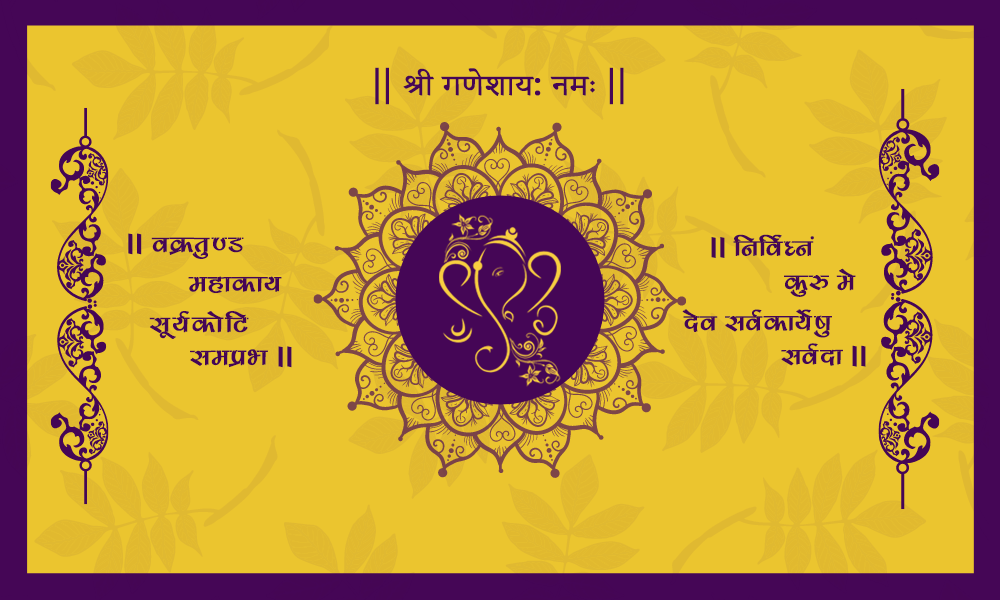
<style>
.page{position:relative;width:1000px;height:600px;background:#ebc52f}
.page>*{position:absolute;margin:0}
.t1{font:36.1px "AdobeDevanagari-Regular";color:#450656;font-weight:bold;scale:1.09 1}
.t2{font:36.1px "MyriadPro-Regular";color:#450656;font-weight:bold;scale:1.09 1}
.t3{font:27.5px "KrutiDev180";letter-spacing:0.02em;color:#450555;font-weight:bold;scale:1.09 1}
.t4{font:27.5px "YatraOne-Regular";letter-spacing:0.02em;color:#450555;font-weight:bold;scale:1.09 1}
.t5{font:27.7px "KrutiDev180";color:#450654;font-weight:bold;scale:1.09 1}
.t6{font:27.7px "YatraOne-Regular";letter-spacing:0.02em;color:#450654;font-weight:bold;scale:1.09 1}
</style>
<div class="page">
<p class="t1" style="left:375px;top:67px;width:249px;height:38px"><span class="t2">|| </span>श्री गणेशाय<span class="t2">: </span>नमः<span class="t2"> ||</span></p>
<p class="t3" style="left:128px;top:233px;width:116px;height:26px"><span class="t4">ll</span> oØrq.M</p>
<p class="t5" style="left:711px;top:234px;width:103px;height:24px"><span class="t6">ll </span>fufoZ?ua</p>
<p class="t5" style="left:784px;top:268px;width:72px;height:29px">dq# es</p>
<p class="t3" style="left:188px;top:276px;width:94px;height:17px">egkdk;</p>
<p class="t3" style="left:149px;top:311px;width:100px;height:28px">lw;ZdksfV</p>
<p class="t5" style="left:682px;top:309px;width:150px;height:29px">nso loZdk;Zs"kq</p>
<p class="t3" style="left:190px;top:346px;width:102px;height:22px">leçHk <span class="t4">ll</span></p>
<p class="t5" style="left:781px;top:343px;width:85px;height:24px">loZnk <span class="t6">ll</span></p>
</div>
